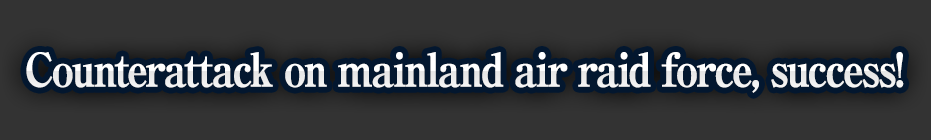
<style>
.page{position:relative;width:931px;height:140px;background:#333333}
.page>*{position:absolute;margin:0}
.t1{font:46px "RyuminPro-ExBold";letter-spacing:-0.08em;color:#ffffff;font-weight:bold;scale:0.9 1}
</style>
<div class="page">
<p class="t1" style="left:26px;top:52px;width:878px;height:41px">Counterattack on mainland air raid force, success!</p>
</div>
